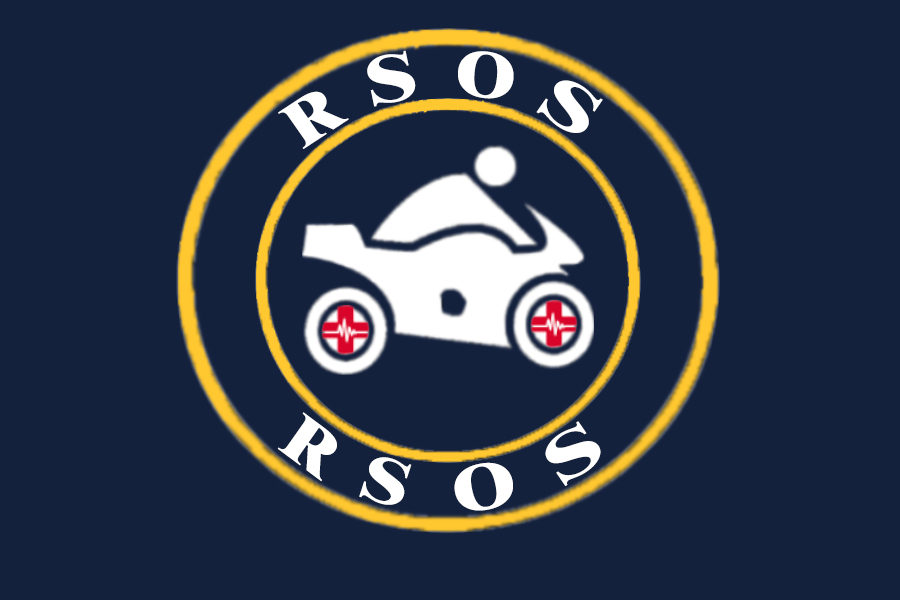
<style>
.page{position:relative;width:900px;height:600px;background:#14213d}
.page>*{position:absolute;margin:0}
.t1{font:68px "Dutch801BT-ExtraBold";color:#ffffff;scale:1.21 1}
.t2{font:65.9px "Dutch801BT-ExtraBold";color:#ffffff;scale:1.14 1}
.t3{font:66.6px "Dutch801BT-ExtraBold";color:#ffffff;scale:1.39 1}
.t4{font:65.7px "Dutch801BT-ExtraBold";color:#ffffff;scale:1.11 1}
.t5{font:65.7px "Dutch801BT-ExtraBold";color:#ffffff;scale:1.12 1}
.t6{font:65.7px "Dutch801BT-ExtraBold";color:#ffffff;scale:1.4 1}
.t7{font:65.7px "Dutch801BT-ExtraBold";color:#ffffff;scale:1.17 1}
.t8{font:65.7px "Dutch801BT-ExtraBold";color:#ffffff;scale:1.2 1}
</style>
<div class="page">
<p class="t1" style="left:367px;top:50px;width:49px;height:57px;rotate:-12deg">S</p>
<p class="t2" style="left:458px;top:51px;width:56px;height:48px;rotate:7deg">O</p>
<p class="t3" style="left:536px;top:80px;width:67px;height:53px;rotate:34deg">S</p>
<p class="t4" style="left:278px;top:91px;width:71px;height:58px;rotate:-33deg">R</p>
<p class="t5" style="left:277px;top:412px;width:60px;height:70px;rotate:37deg">R</p>
<p class="t6" style="left:545px;top:421px;width:56px;height:65px;rotate:-35deg">S</p>
<p class="t7" style="left:359px;top:457px;width:53px;height:48px;rotate:18deg">S</p>
<p class="t8" style="left:454px;top:462px;width:59px;height:49px;rotate:-12deg">O</p>
</div>
